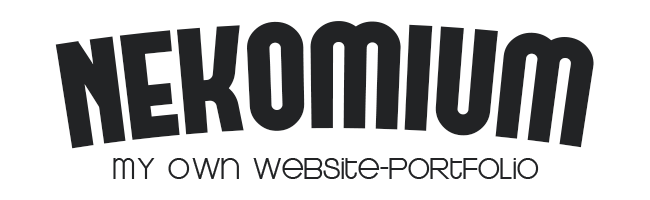
<style>
.page{position:relative;width:650px;height:200px;background:#ffffff}
.page>*{position:absolute;margin:0}
.t1{font:150px "FORQUE";color:#222325}
.t2{font:36px "KravitzThermal";color:#222325}
</style>
<div class="page">
<p class="t1" style="left:55px;top:21px;width:539px;height:128px">NEKOMIUM</p>
<p class="t2" style="left:113px;top:158px;width:426px;height:21px">My own website-portfolio</p>
</div>
